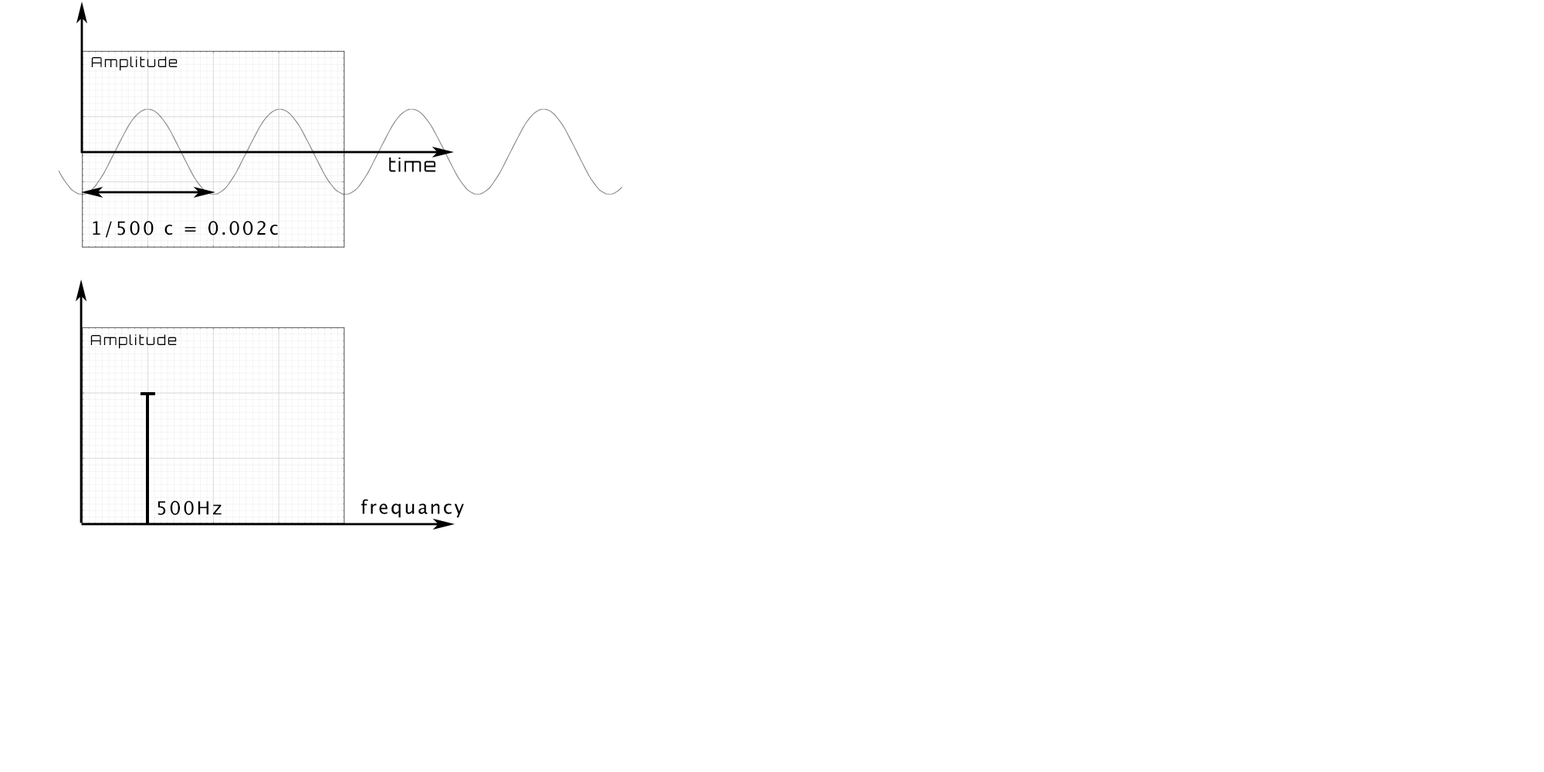
<style>
.page{position:relative;width:1544px;height:772px;background:#ffffff}
.page>*{position:absolute;margin:0}
.t1{font:13.9px "Orbitron-Light";letter-spacing:0.1em;color:#000000}
.t2{font:18.5px "Orbitron-Light";letter-spacing:0.1em;color:#000000}
.t3{font:18.5px "LucidaGrande";letter-spacing:0.1em;color:#000000}
</style>
<div class="page">
<p class="t1" style="left:91px;top:56px;width:87px;height:15px">Amplitude</p>
<p class="t2" style="left:389px;top:158px;width:46px;height:14px">time</p>
<p class="t3" style="left:93px;top:221px;width:185px;height:17px">1/500 c = 0.002c</p>
<p class="t1" style="left:90px;top:334px;width:87px;height:15px">Amplitude</p>
<p class="t3" style="left:158px;top:500px;width:64px;height:15px">500Hz</p>
<p class="t3" style="left:361px;top:499px;width:103px;height:19px">frequancy</p>
</div>
